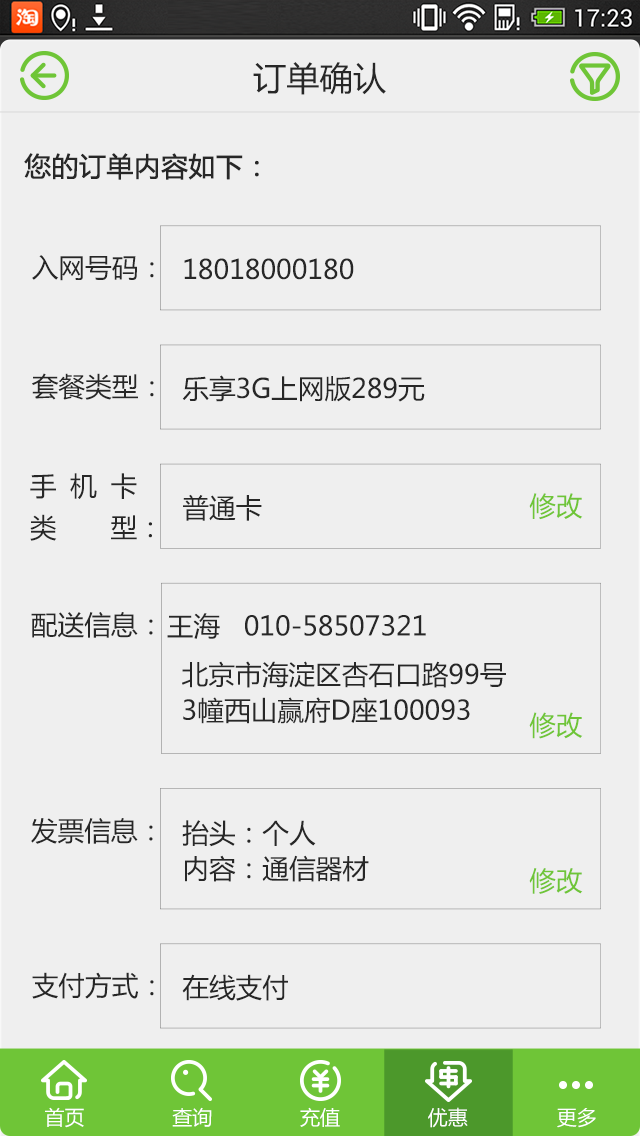
<style>
.page{position:relative;width:640px;height:1136px;background:#efefef}
.page>*{position:absolute;margin:0}
.t1{font:33.3px "MicrosoftYaHei";color:#272727}
.t2{font:26.7px "MicrosoftYaHei";color:#272727;font-weight:bold}
.t3{font:26.7px "MicrosoftYaHei";color:#272727}
.t4{font:26.7px/41.5px "MicrosoftYaHei";letter-spacing:0.51em;color:#272727}
.t5{font:26.7px/41.5px "MicrosoftYaHei";letter-spacing:0.7em;color:#272727}
.t6{font:26.7px "MicrosoftYaHei";color:#6fc537}
.t7{font:26.7px/35.5px "MicrosoftYaHei";color:#272727}
.t8{font:20px "MicrosoftYaHei";color:#ffffff}
</style>
<div class="page">
<p class="t1" style="left:253px;top:62px;width:133px;height:33px">订单确认</p>
<p class="t2" style="left:24px;top:153px;width:235px;height:27px">您的订单内容如下：</p>
<p class="t3" style="left:32px;top:255px;width:122px;height:26px">入网号码：</p>
<p class="t3" style="left:184px;top:258px;width:170px;height:22px">18018000180</p>
<p class="t3" style="left:32px;top:373px;width:122px;height:27px">套餐类型：</p>
<p class="t3" style="left:182px;top:375px;width:243px;height:27px">乐享3G上网版289元</p>
<p class="t4" style="left:30px;top:473px;width:122px;height:68px">手机卡<br><span class="t5">类型：</span></p>
<p class="t3" style="left:183px;top:494px;width:79px;height:27px">普通卡</p>
<p class="t6" style="left:529px;top:493px;width:54px;height:27px">修改</p>
<p class="t3" style="left:31px;top:612px;width:122px;height:26px">配送信息：</p>
<p class="t3" style="left:167px;top:613px;width:259px;height:26px">王海   010-58507321</p>
<p class="t7" style="left:182px;top:661px;width:324px;height:63px">北京市海淀区杏石口路99号<br>3幢西山赢府D座100093</p>
<p class="t6" style="left:529px;top:712px;width:54px;height:27px">修改</p>
<p class="t3" style="left:31px;top:818px;width:122px;height:26px">发票信息：</p>
<p class="t7" style="left:182px;top:820px;width:187px;height:62px">抬头：个人  <br>内容：通信器材</p>
<p class="t6" style="left:529px;top:868px;width:54px;height:26px">修改</p>
<p class="t3" style="left:32px;top:972px;width:122px;height:27px">支付方式：</p>
<p class="t3" style="left:182px;top:974px;width:106px;height:27px">在线支付</p>
<p class="t8" style="left:45px;top:1107px;width:39px;height:21px">首页</p>
<p class="t8" style="left:172px;top:1107px;width:40px;height:20px">查询</p>
<p class="t8" style="left:300px;top:1107px;width:40px;height:20px">充值</p>
<p class="t8" style="left:428px;top:1107px;width:40px;height:21px">优惠</p>
<p class="t8" style="left:557px;top:1108px;width:39px;height:20px">更多</p>
</div>
